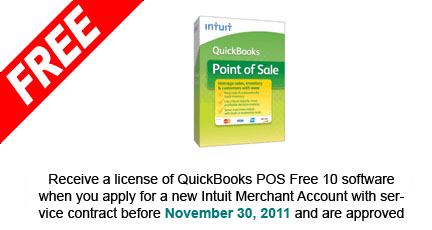
<style>
.page{position:relative;width:432px;height:230px;background:#ffffff}
.page>*{position:absolute;margin:0}
.t1{font:14px "ArialMT";color:#000000}
.t2{font:14px "Arial-BoldMT";color:#007b79}
</style>
<div class="page">
<p class="t1" style="left:38px;top:173px;width:367px;height:48px;text-align:center">Receive a license of QuickBooks POS Free 10 software when you apply for a new Intuit Merchant Account with service contract before <span class="t2">November 30, 2011</span> and are approved</p>
</div>
